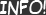
<style>
.page{position:relative;width:46px;height:15px;background:#333333}
.page>*{position:absolute;margin:0}
.t1{font:22.2px "SuplexmentaryComicNC";color:#ffffff;scale:0.77 1}
</style>
<div class="page">
<p class="t1" style="left:0px;top:0px;width:46px;height:15px">INFO!</p>
</div>
